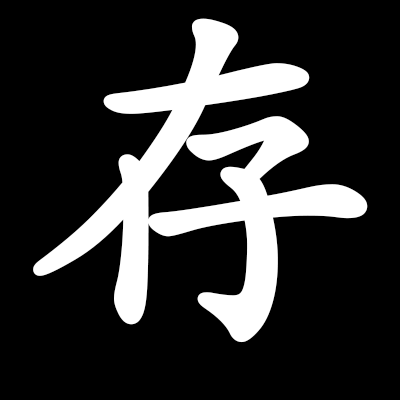
<style>
.page{position:relative;width:400px;height:400px;background:#000000}
.page>*{position:absolute;margin:0}
.t1{font:356px "STKaiti";color:#ffffff;font-weight:bold}
</style>
<div class="page">
<p class="t1" style="left:33px;top:18px;width:335px;height:325px">存</p>
</div>
